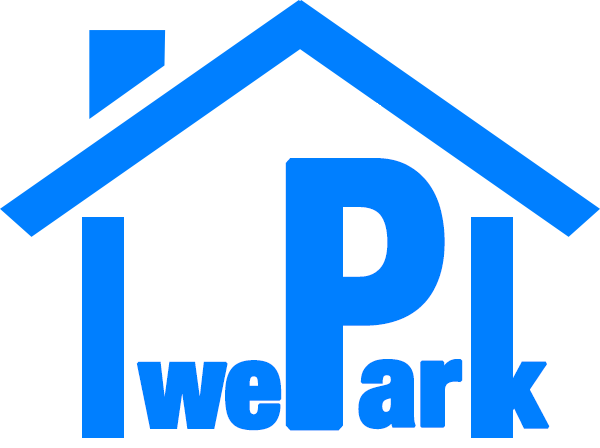
<style>
.page{position:relative;width:600px;height:448px;background:#ffffff}
.page>*{position:absolute;margin:0}
.t1{font:367.5px "HelveticaNeue-CondensedBold";letter-spacing:-0.04em;color:#007fff;font-weight:bold;scale:0.91 1}
.t2{font:118.1px "HelveticaNeue-CondensedBlack";letter-spacing:-0.02em;color:#007fff;font-weight:bold}
.t3{font:118.1px "HelveticaNeue-CondensedBlack";letter-spacing:-0.04em;color:#007fff;font-weight:bold}
</style>
<div class="page">
<p class="t1" style="left:285px;top:158px;width:160px;height:273px">P</p>
<p class="t2" style="left:488px;top:341px;width:62px;height:88px">k</p>
<p class="t3" style="left:136px;top:360px;width:146px;height:71px">we</p>
<p class="t2" style="left:358px;top:359px;width:105px;height:71px">ar</p>
</div>
